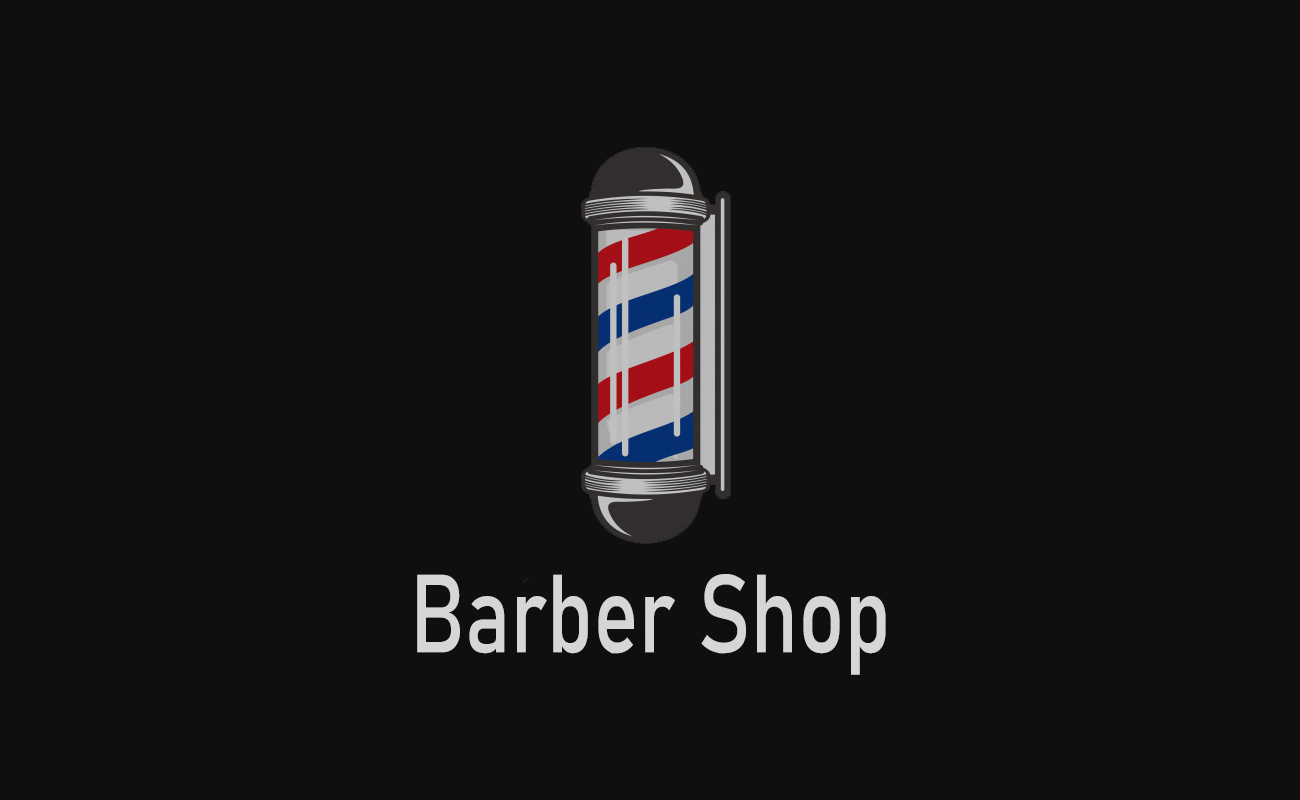
<style>
.page{position:relative;width:1300px;height:800px;background:#0f0f0f}
.page>*{position:absolute;margin:0}
.t1{font:109.1px "Bahnschrift";color:#d6d6d6;scale:0.78 1}
</style>
<div class="page">
<p class="t1" style="left:417px;top:574px;width:469px;height:101px">Barber Shop</p>
</div>
